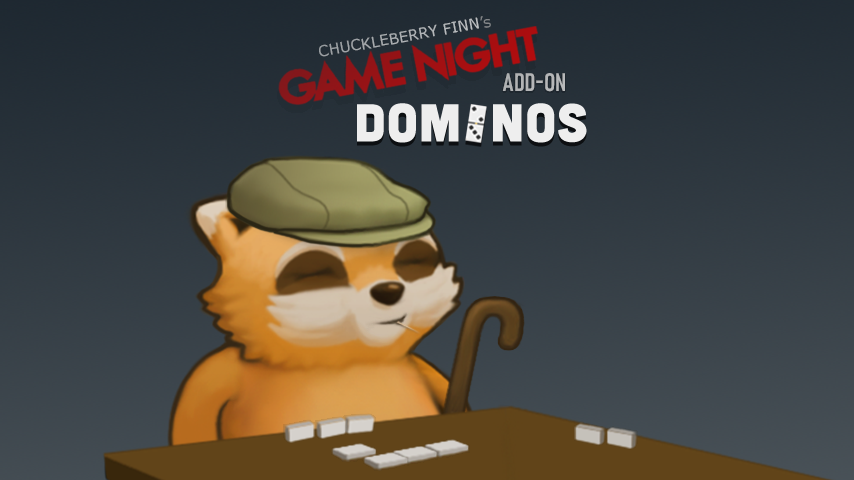
<style>
.page{position:relative;width:854px;height:480px}
.page>*{position:absolute;margin:0}
.t1{font:15px "Verdana";color:#ffffff}
.t2{font:15px "Verdana";color:#ababab}
.t3{font:25px "Bahnschrift-SemiBoldCondensed";color:#b4b5b7}
.t4{font:52.6px "Cubano-Sharp";color:#eeeeee;font-weight:bold}
</style>
<div class="page">
<p class="t1" style="left:319px;top:16px;width:172px;height:41px;rotate:-10deg">CHUCKLEBERRY FINN<span class="t2">’s</span></p>
<p class="t3" style="left:502px;top:73px;width:63px;height:19px">ADD-ON</p>
<p class="t4" style="left:357px;top:103px;width:230px;height:40px">DOM  NOS</p>
</div>
